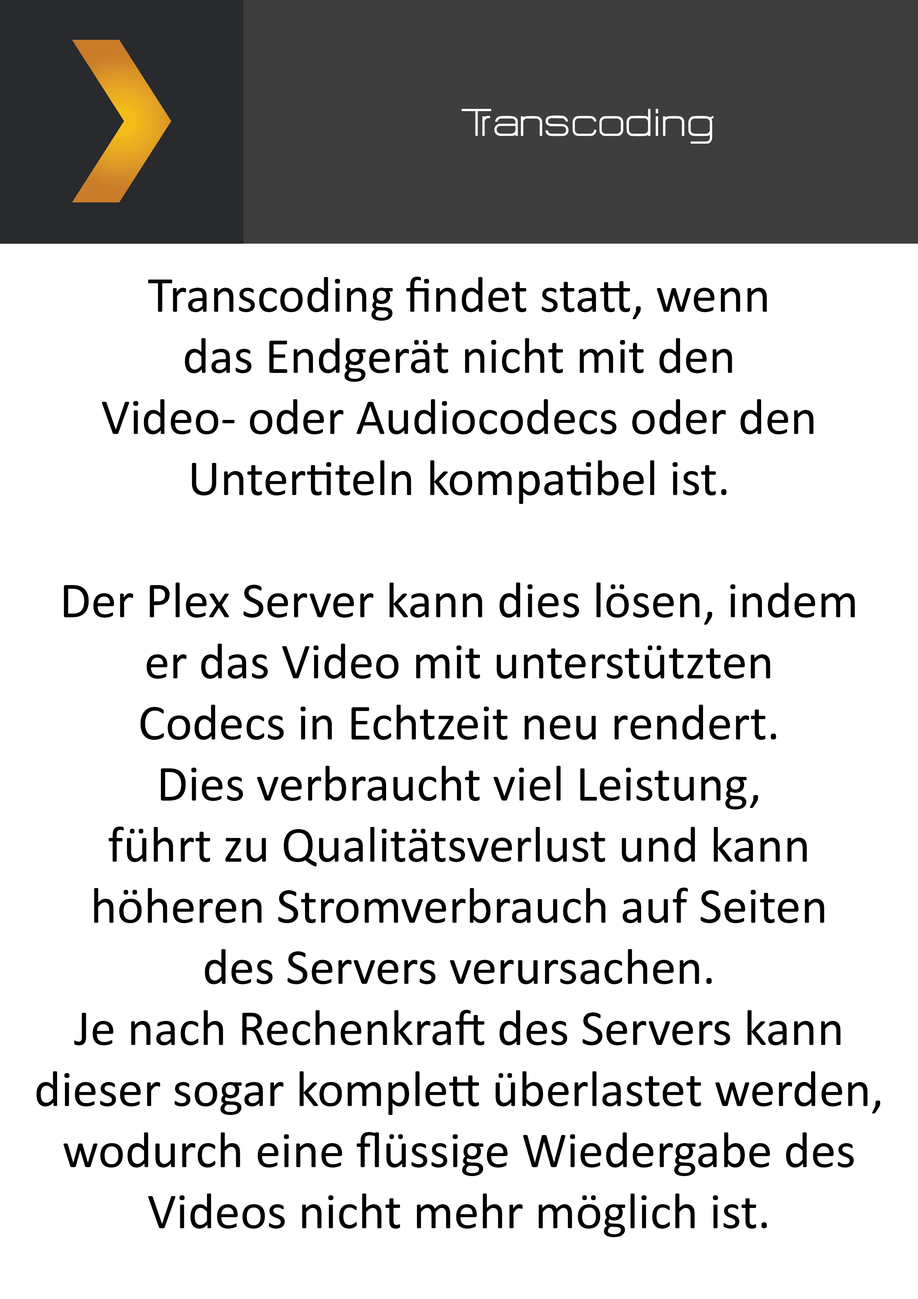
<style>
.page{position:relative;width:918px;height:1299px;background:#ffffff}
.page>*{position:absolute;margin:0}
.t1{font:47.8px "HURTMOLDPersonalUse-Regular";color:#ffffff}
.t2{font:50.9px "Calibri";color:#000000}
</style>
<div class="page">
<p class="t1" style="left:462px;top:109px;width:252px;height:35px">Transcoding</p>
<p class="t2" style="left:36px;top:277px;width:844px;height:960px;text-align:center">Transcoding findet statt, wenn<br>das Endgerät nicht mit den<br>Video- oder Audiocodecs oder den<br>Untertiteln kompatibel ist.<br><br>Der Plex Server kann dies lösen, indem<br>er das Video mit unterstützten<br>Codecs in Echtzeit neu rendert.<br>Dies verbraucht viel Leistung,<br>führt zu Qualitätsverlust und kann<br>höheren Stromverbrauch auf Seiten<br>des Servers verursachen.<br>Je nach Rechenkraft des Servers kann<br>dieser sogar komplett überlastet werden,<br>wodurch eine flüssige Wiedergabe des<br>Videos nicht mehr möglich ist.</p>
</div>
